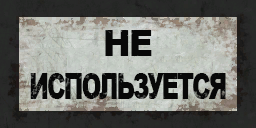
<style>
.page{position:relative;width:256px;height:128px}
.page>*{position:absolute;margin:0}
.t1{font:36px/43px "Arial-Black";letter-spacing:-0.08em;color:#080808;scale:0.66 1}
.t2{font:36px/43px "Arial-Black";letter-spacing:-0.08em;color:#080808;scale:0.93 1}
</style>
<div class="page">
<p class="t1" style="left:30px;top:30px;width:196px;height:69px;text-align:center"><span class="t2">НЕ<br></span>ИСПОЛЬЗУЕТСЯ</p>
</div>
